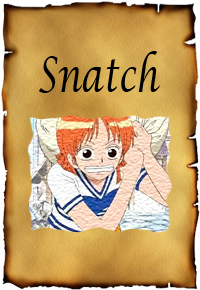
<style>
.page{position:relative;width:200px;height:290px}
.page>*{position:absolute;margin:0}
.t1{font:48px "LucidaCalligraphy-Italic";color:#000000;scale:0.7 1}
</style>
<div class="page">
<p class="t1" style="left:39px;top:51px;width:121px;height:42px">Snatch</p>
</div>
